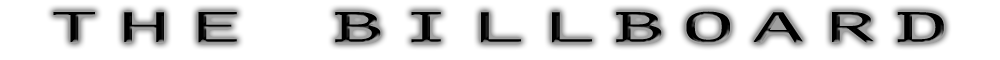
<style>
.page{position:relative;width:1000px;height:60px;background:#ffffff}
.page>*{position:absolute;margin:0}
.t1{font:44.5px "OratorStd";color:#000000;scale:2.64 1}
</style>
<div class="page">
<p class="t1" style="left:53px;top:11px;width:891px;height:32px">THE BILLBOARD</p>
</div>
